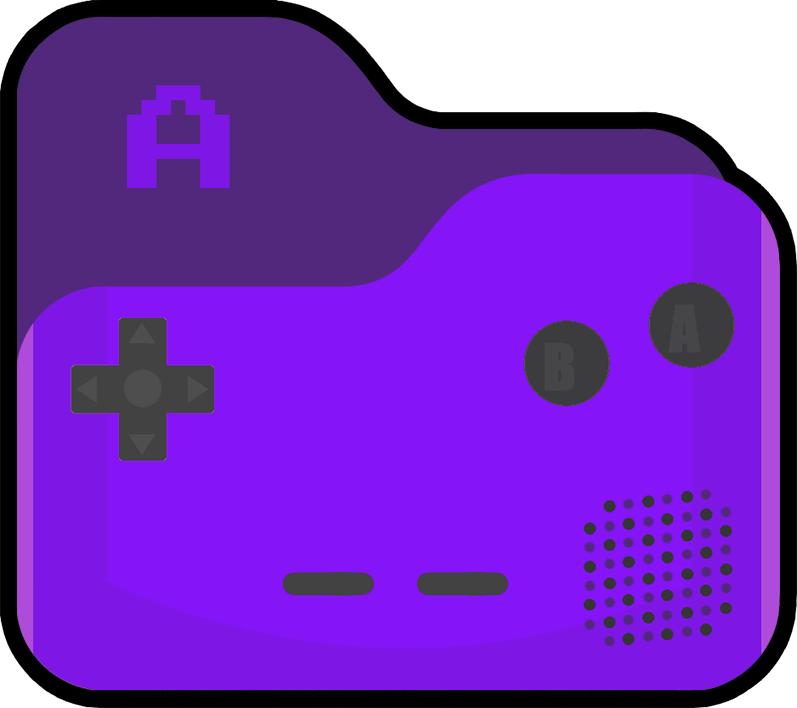
<style>
.page{position:relative;width:797px;height:708px;background:#8514f7}
.page>*{position:absolute;margin:0}
.t1{font:150px "PixelEmulator";color:#7e17e5}
</style>
<div class="page">
<p class="t1" style="left:127px;top:85px;width:103px;height:103px">A</p>
</div>
